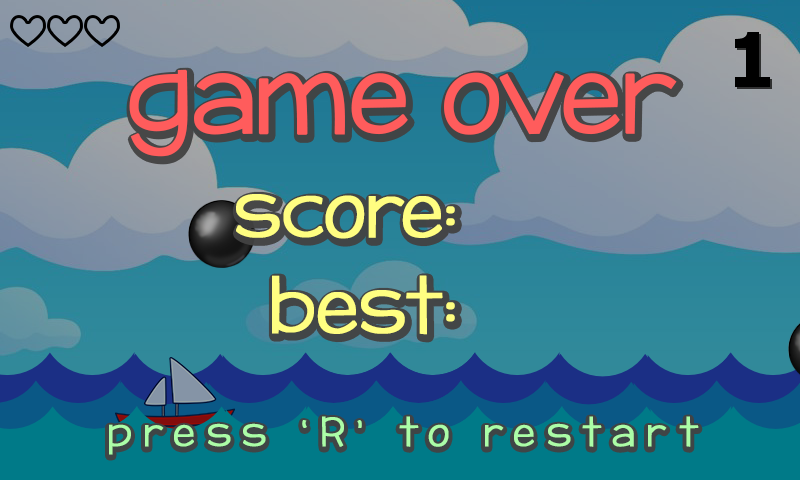
<style>
.page{position:relative;width:800px;height:480px}
.page>*{position:absolute;margin:0}
.t1{font:100.5px "KGPayphone";color:#ff5c5c;font-weight:bold}
.t2{font:70px "KGPayphone";color:#fffe81;font-weight:bold}
.t3{font:36px "KGPayphone";letter-spacing:0.32em;color:#abfda7;font-weight:bold}
</style>
<div class="page">
<p class="t1" style="left:129px;top:69px;width:548px;height:88px">game over</p>
<p class="t2" style="left:236px;top:194px;width:219px;height:45px">score:</p>
<p class="t2" style="left:272px;top:275px;width:183px;height:60px">best:</p>
<p class="t3" style="left:109px;top:416px;width:590px;height:39px">press ‘R’ to restart</p>
</div>
